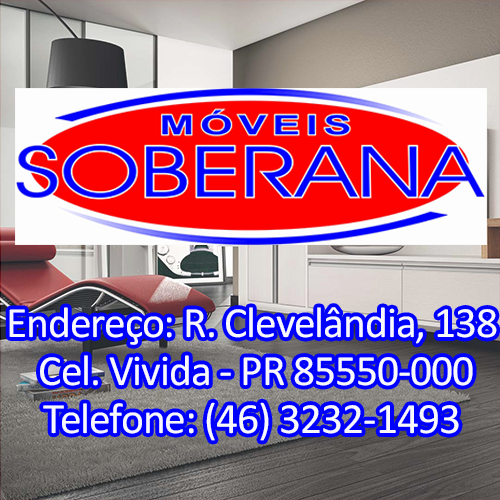
<style>
.page{position:relative;width:500px;height:500px}
.page>*{position:absolute;margin:0}
.t1{font:43.6px/48px "Calibri";letter-spacing:-0.025em;color:#f8f8fb}
</style>
<div class="page">
<p class="t1" style="left:9px;top:307px;width:488px;height:134px;text-align:center">Endereço: R. Clevelândia, 138<br> Cel. Vivida - PR 85550-000<br>Telefone: (46) 3232-1493</p>
</div>
